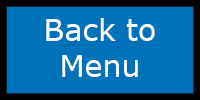
<style>
.page{position:relative;width:200px;height:100px;background:#0072bc}
.page>*{position:absolute;margin:0}
.t1{font:30px "MSReferenceSansSerif";color:#ffffff}
</style>
<div class="page">
<p class="t1" style="left:46px;top:18px;width:109px;height:59px;text-align:center">Back to Menu</p>
</div>
